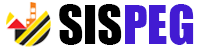
<style>
.page{position:relative;width:200px;height:50px;background:#ffffff}
.page>*{position:absolute;margin:0}
.t1{font:49.2px "Impact";color:#000000}
.t2{font:49.2px "Impact";color:#421bd2}
</style>
<div class="page">
<p class="t1" style="left:59px;top:4px;width:135px;height:41px">SIS<span class="t2">PEG</span></p>
</div>
